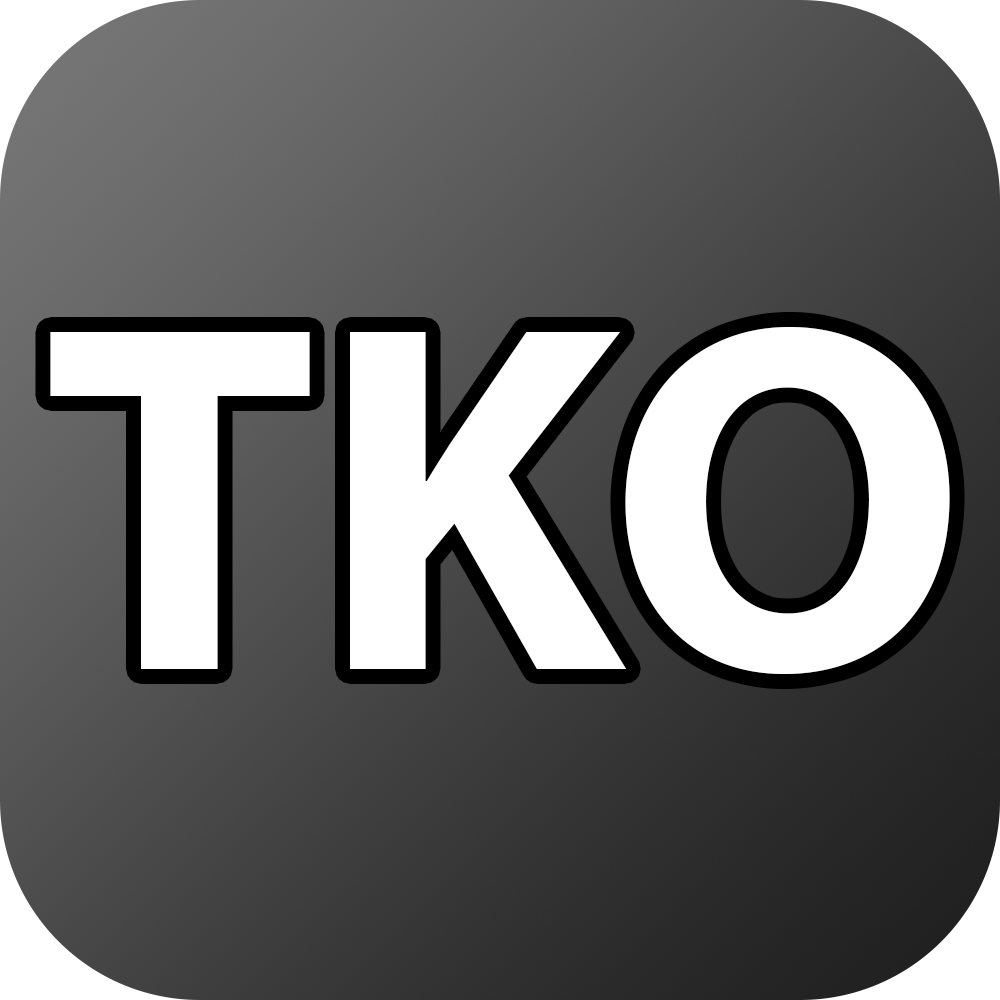
<style>
.page{position:relative;width:1000px;height:1000px}
.page>*{position:absolute;margin:0}
.t1{font:500px "MyriadPro-Bold";color:#ffffff}
</style>
<div class="page">
<p class="t1" style="left:50px;top:327px;width:900px;height:347px">TKO</p>
</div>
